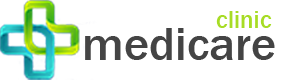
<style>
.page{position:relative;width:300px;height:80px;background:#ffffff}
.page>*{position:absolute;margin:0}
.t1{font:25.1px "FranklinGothic-Medium";color:#a7dc25}
.t2{font:48.2px "FranklinGothic-Medium";color:#444444}
</style>
<div class="page">
<p class="t1" style="left:216px;top:11px;width:56px;height:17px">clinic</p>
<p class="t2" style="left:85px;top:28px;width:190px;height:32px">medicare</p>
</div>
